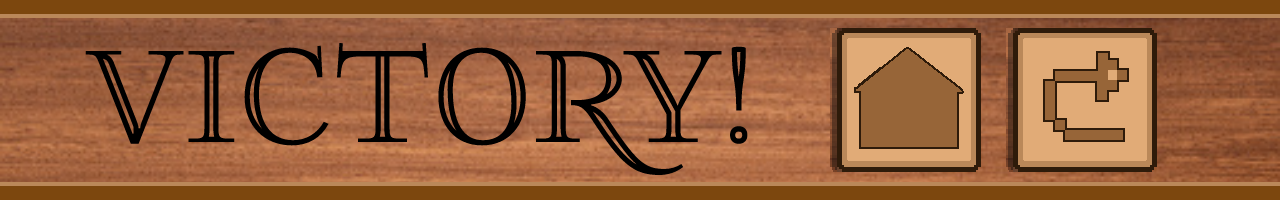
<style>
.page{position:relative;width:1280px;height:200px}
.page>*{position:absolute;margin:0}
.t1{font:200px "FoglihtenNo01";color:#000000}
</style>
<div class="page">
<p class="t1" style="left:85px;top:43px;width:663px;height:132px">VICTORY!</p>
</div>
